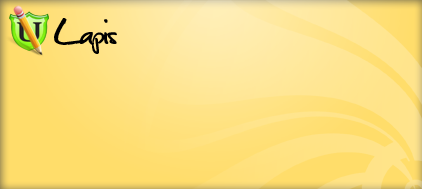
<style>
.page{position:relative;width:422px;height:189px}
.page>*{position:absolute;margin:0}
.t1{font:48px "Christopherhand";letter-spacing:-0.025em;color:#000000}
</style>
<div class="page">
<p class="t1" style="left:54px;top:18px;width:63px;height:36px">Lapis</p>
</div>
